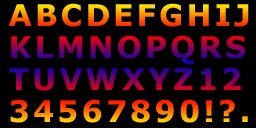
<style>
.page{position:relative;width:256px;height:128px;background:#000000}
.page>*{position:absolute;margin:0}
.t1{font:30px/32px "Verdana-Bold";letter-spacing:0.1em}
</style>
<div class="page">
<p class="t1" style="left:8px;top:3px;width:241px;height:120px">ABCDEFGHIJ<br>KLMNOPQRS<br>TUVWXYZ12<br>34567890!?.</p>
</div>
